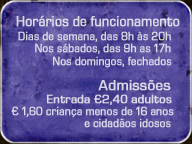
<style>
.page{position:relative;width:192px;height:144px}
.page>*{position:absolute;margin:0}
.t1{font:14.7px "EurostileNextLTPro-Regular";color:#dddbeb;font-weight:bold;scale:0.9 1}
.t2{font:12px "EurostileNextLTPro-Regular";color:#dddbeb;font-weight:bold;scale:0.9 1}
.t3{font:12px "EurostileNextLTPro-Regular";color:#dbdaea;font-weight:bold;scale:0.9 1}
.t4{font:14.7px "EurostileNextLTPro-Regular";color:#dad8e9;font-weight:bold}
.t5{font:12px "EurostileNextLTPro-Regular";color:#dddbeb;font-weight:bold}
.t6{font:12px "EurostileNextLTPro-Regular";color:#deddec;font-weight:bold;scale:0.9 1}
</style>
<div class="page">
<p class="t1" style="left:16px;top:15px;width:164px;height:12px">Horários de funcionamento</p>
<p class="t2" style="left:18px;top:31px;width:153px;height:11px">Dias de semana, das 8h às 20h</p>
<p class="t2" style="left:35px;top:43px;width:136px;height:11px">Nos sábados, das 9h as 17h</p>
<p class="t3" style="left:53px;top:56px;width:119px;height:12px">Nos domingos, fechados</p>
<p class="t4" style="left:98px;top:80px;width:73px;height:11px">Admissões</p>
<p class="t5" style="left:47px;top:94px;width:125px;height:11px">Entrada €2,40 adultos</p>
<p class="t2" style="left:11px;top:106px;width:163px;height:12px">€ 1,60 criança menos de 16 anos</p>
<p class="t6" style="left:84px;top:118px;width:87px;height:10px">e cidadãos idosos</p>
</div>
